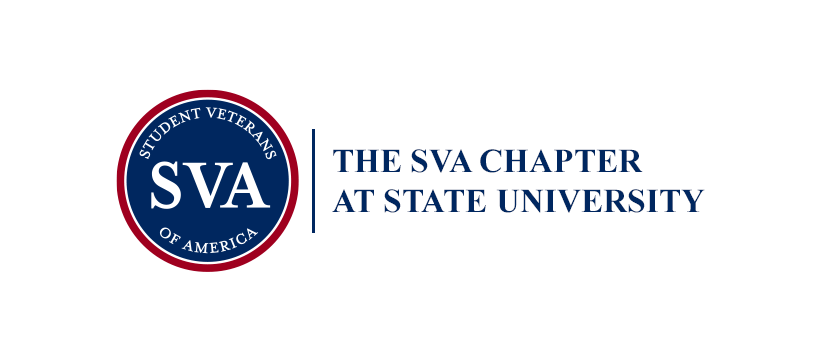
<style>
.page{position:relative;width:820px;height:360px;background:#ffffff}
.page>*{position:absolute;margin:0}
.t1{font:33.3px "TimesNewRomanPS-BoldMT";color:#002760}
</style>
<div class="page">
<p class="t1" style="left:332px;top:149px;width:373px;height:64px">THE SVA CHAPTER<br>AT STATE UNIVERSITY</p>
</div>
